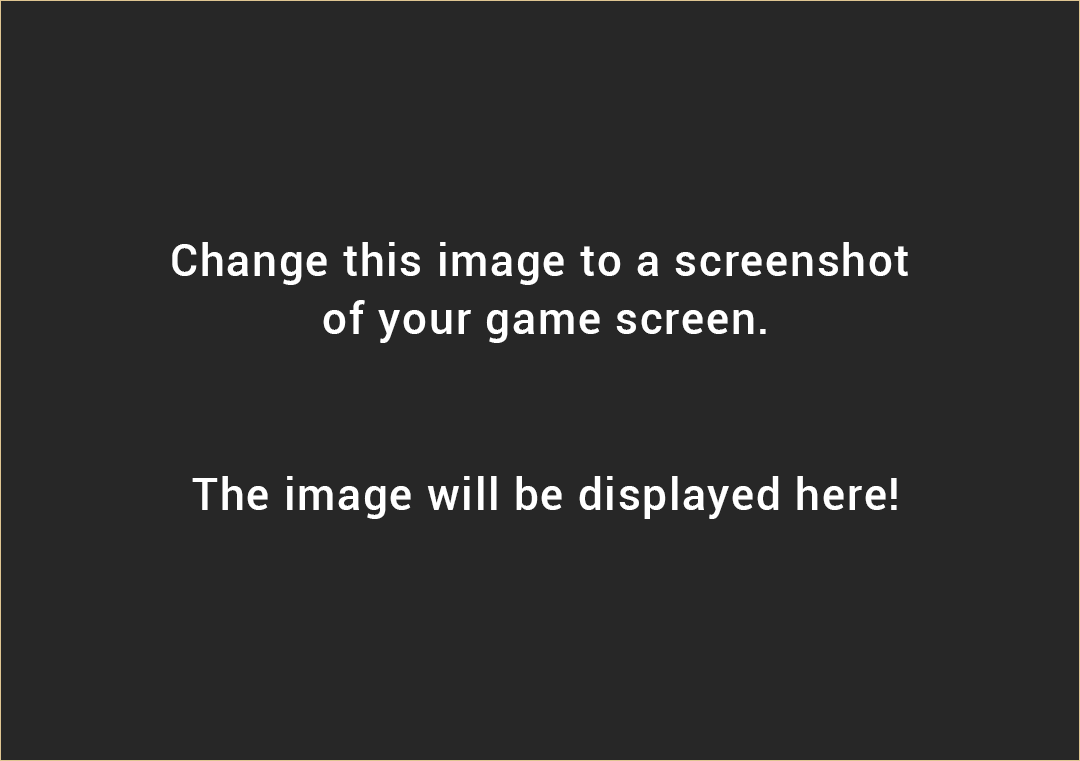
<style>
.page{position:relative;width:1080px;height:761px;background:#272727}
.page>*{position:absolute;margin:0}
.t1{font:44px/58.6px "Roboto-Medium";letter-spacing:0.04em;color:#ffffff}
</style>
<div class="page">
<p class="t1" style="left:172px;top:242px;width:736px;height:277px;text-align:center">Change this image to a screenshot <br>of your game screen.<br><br><br>The image will be displayed here!</p>
</div>
